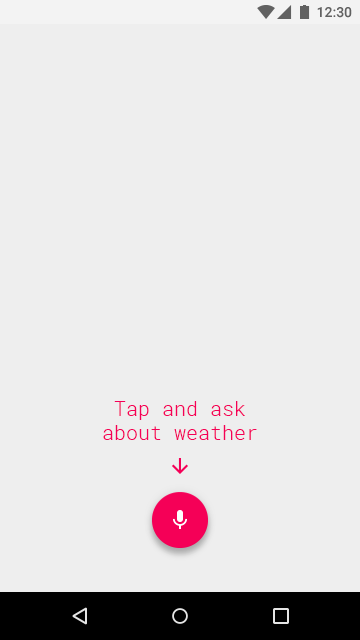
<style>
.page{position:relative;width:360px;height:640px;background:#eeeeee}
.page>*{position:absolute;margin:0}
.t1{font:20px/24px "RobotoMono-Light";color:#f50057}
</style>
<div class="page">
<p class="t1" style="left:103px;top:401px;width:154px;height:39px;text-align:center">Tap and ask about weather</p>
</div>
